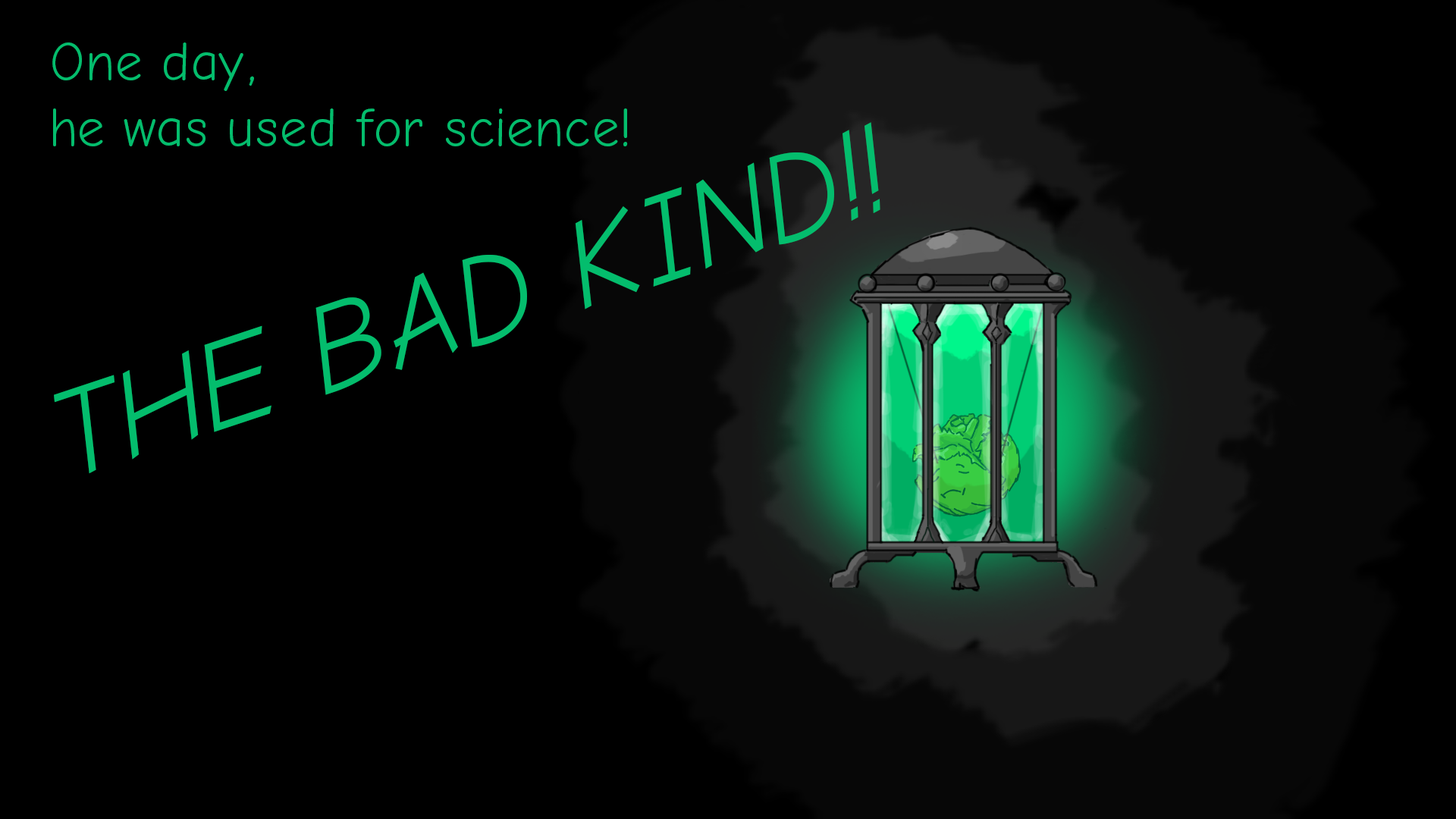
<style>
.page{position:relative;width:1456px;height:819px;background:#000000}
.page>*{position:absolute;margin:0}
.t1{font:54.6px "ComicNeue";color:#04bd6d}
.t2{font:125.6px "ComicNeueAngular-Oblique";color:#04bd6d}
</style>
<div class="page">
<p class="t1" style="left:52px;top:42px;width:576px;height:104px">One day,<br>he was used for science!</p>
<p class="t2" style="left:54px;top:122px;width:826px;height:352px;rotate:-18deg">THE BAD KIND!!</p>
</div>
